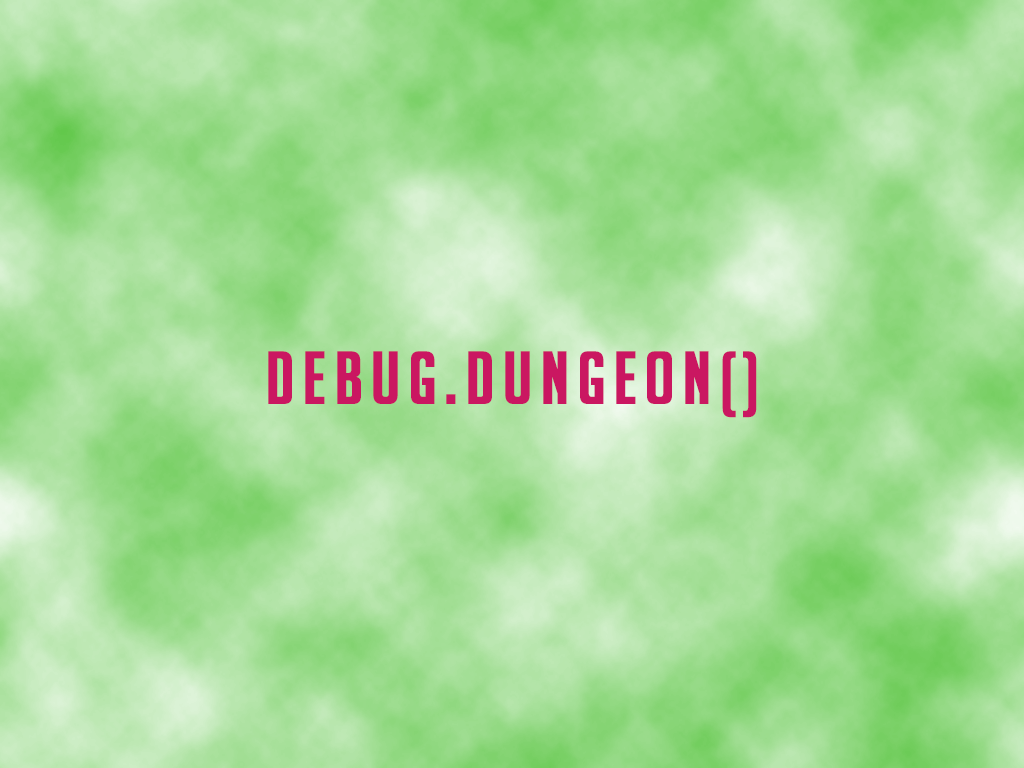
<style>
.page{position:relative;width:1024px;height:768px}
.page>*{position:absolute;margin:0}
.t1{font:72px "BigNoodleTitling";letter-spacing:0.1em;color:#ca1761;text-transform:uppercase;font-weight:bold}
</style>
<div class="page">
<p class="t1" style="left:268px;top:351px;width:489px;height:67px">Debug.Dungeon()</p>
</div>
